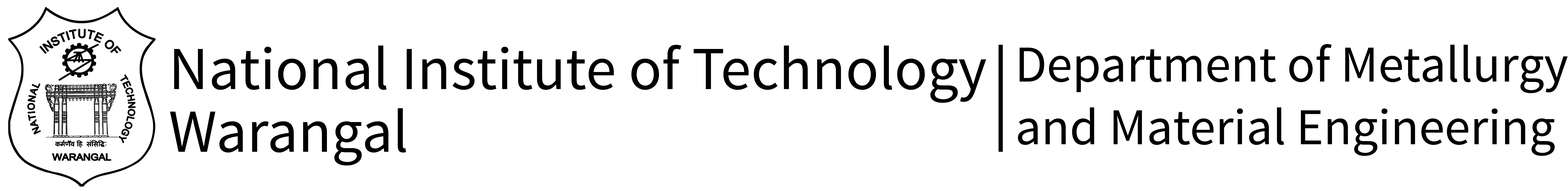
<style>
.page{position:relative;width:1568px;height:191px;background:#ffffff}
.page>*{position:absolute;margin:0}
.t1{font:61.1px/31.4px "SourceSansPro-Regular";color:#000000}
.t2{font:51.7px/31.4px "SourceSansPro-Regular";color:#000000}
</style>
<div class="page">
<p class="t1" style="left:170px;top:45px;width:816px;height:121px">National Institute of Technology <br><br>Warangal</p>
<p class="t2" style="left:1018px;top:44px;width:550px;height:112px">Department of Metallurgy <br><br>and Material Engineering</p>
</div>
